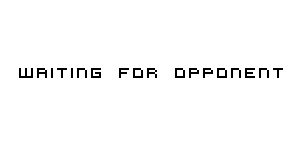
<style>
.page{position:relative;width:300px;height:150px;background:#ffffff}
.page>*{position:absolute;margin:0}
.t1{font:16px "VirtualDJ";color:#000000}
</style>
<div class="page">
<p class="t1" style="left:19px;top:68px;width:264px;height:10px">Waiting for opponent</p>
</div>
